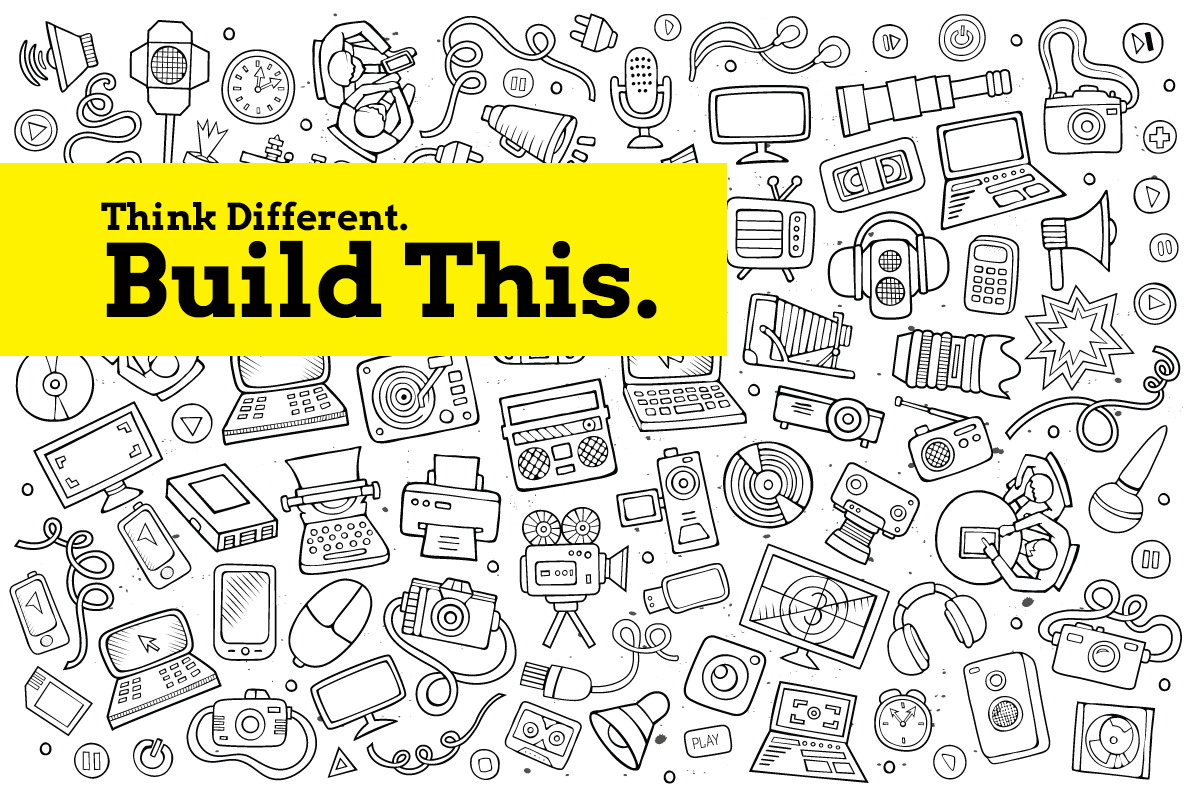
<style>
.page{position:relative;width:1200px;height:800px;background:#ffffff}
.page>*{position:absolute;margin:0}
.t1{font:36.9px "Arvo-Bold";color:#000000}
.t2{font:100.4px "Arvo-Bold";color:#000000}
</style>
<div class="page">
<p class="t1" style="left:101px;top:201px;width:307px;height:30px">Think Different.</p>
<p class="t2" style="left:106px;top:240px;width:551px;height:79px">Build This.</p>
</div>
